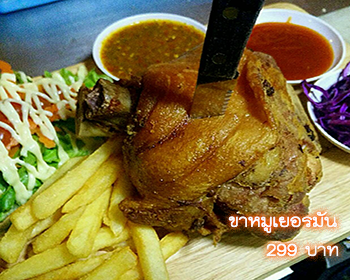
<style>
.page{position:relative;width:350px;height:280px}
.page>*{position:absolute;margin:0}
.t1{font:24px "THKodchasal";color:#ffffff}
</style>
<div class="page">
<p class="t1" style="left:228px;top:211px;width:111px;height:46px;text-align:right">ขาหมูเยอรมัน<br>บาท 299</p>
</div>
